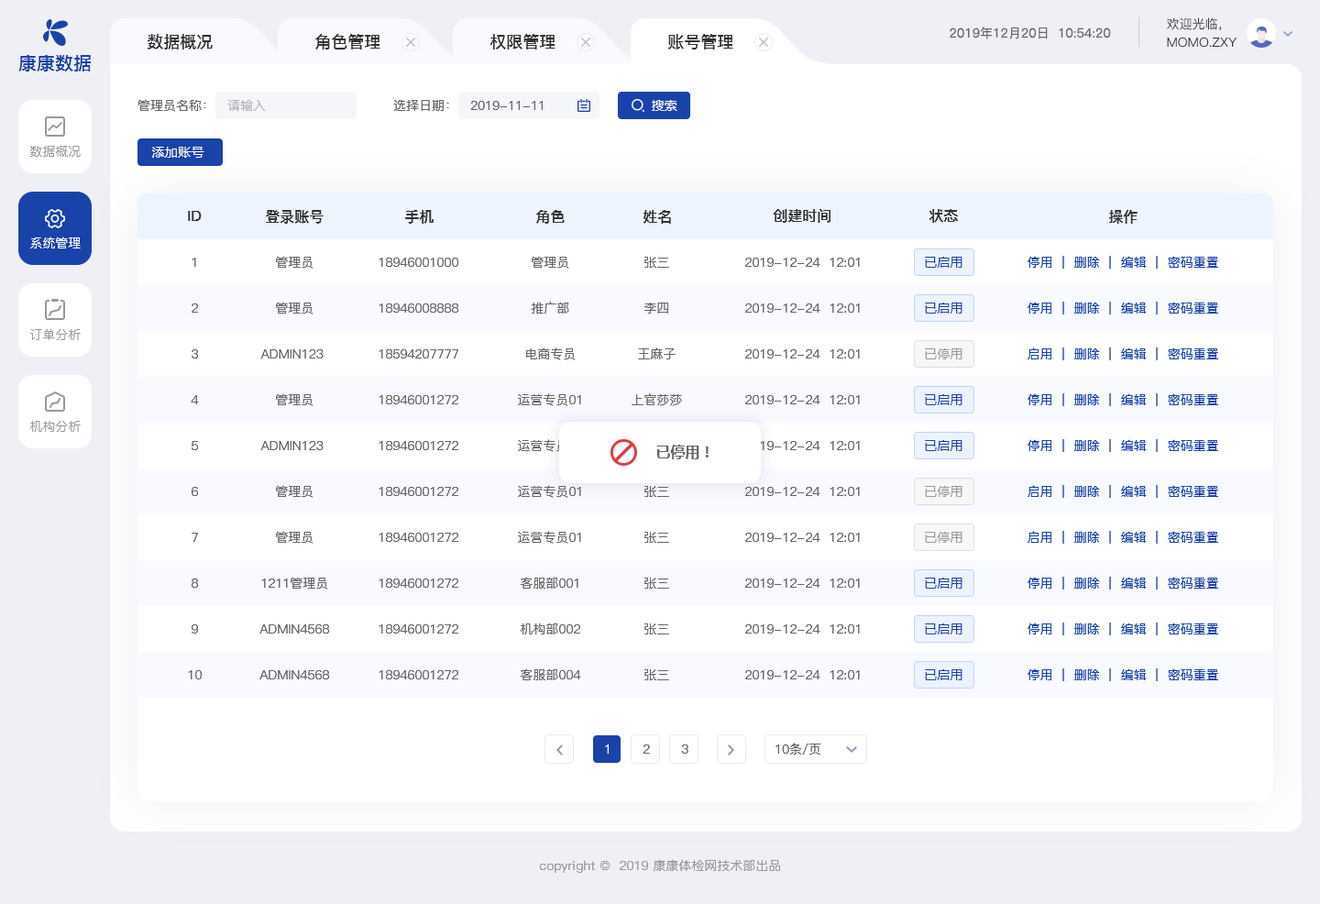
<style>
.page{position:relative;width:1320px;height:904px;background:#ffffff}
.page>*{position:absolute;margin:0}
.t1{font:12.8px "PingFang-SC-Medium";color:#333333;text-transform:uppercase}
.t2{font:12.8px "PingFang-SC-Regular";color:#666666}
.t3{font:16.5px "PingFang-SC-Bold";color:#333333;text-transform:uppercase}
.t4{font:18.3px "PingFangSC-Medium";color:#1a43a9;text-transform:uppercase}
.t5{font:12.8px "PingFang-SC-Medium";color:#666666}
.t6{font:12.8px "PingFang-SC-Medium";color:#b3b3b3}
.t7{font:12.8px "MicrosoftYaHei";letter-spacing:0.02em;color:#ffffff}
.t8{font:12.8px "PingFang-SC-Medium";color:#999999;text-transform:uppercase}
.t9{font:14.7px "PingFang-SC-Bold";color:#333333;text-transform:uppercase}
.t10{font:12.8px "PingFang-SC-Medium";color:#ffffff;text-transform:uppercase}
.t11{font:12.8px "PingFang-SC-Medium";color:#666666;text-transform:uppercase}
.t12{font:12.8px "MicrosoftYaHei";letter-spacing:0.02em;color:#1a43a9}
.t13{font:12.8px "PingFang-SC-Medium";color:#1a43a9;text-transform:uppercase}
.t14{font:12.8px "MicrosoftYaHei";letter-spacing:0.02em;color:#999999}
.t15{font:14.7px "MicrosoftYaHei-Bold";color:#666666}
.t16{font:12.8px "PingFang-SC-Medium";color:#999999}
</style>
<div class="page">
<p class="t1" style="left:1167px;top:17px;width:54px;height:14px">欢迎光临，</p>
<p class="t2" style="left:949px;top:27px;width:162px;height:12px">2019年12月20日  10:54:20</p>
<p class="t3" style="left:148px;top:34px;width:65px;height:15px">数据概况</p>
<p class="t3" style="left:315px;top:34px;width:65px;height:15px">角色管理</p>
<p class="t3" style="left:490px;top:34px;width:65px;height:15px">权限管理</p>
<p class="t3" style="left:668px;top:34px;width:65px;height:15px">账号管理</p>
<p class="t1" style="left:1167px;top:37px;width:69px;height:11px">momo.zxy</p>
<p class="t4" style="left:18px;top:54px;width:73px;height:17px">康康数据</p>
<p class="t5" style="left:137px;top:99px;width:69px;height:13px">管理员名称：</p>
<p class="t6" style="left:227px;top:100px;width:39px;height:11px">请输入</p>
<p class="t5" style="left:393px;top:100px;width:56px;height:11px">选择日期：</p>
<p class="t5" style="left:470px;top:101px;width:73px;height:9px">2019-11-11</p>
<p class="t7" style="left:652px;top:100px;width:25px;height:11px">搜索</p>
<p class="t8" style="left:30px;top:146px;width:51px;height:11px">数据概况</p>
<p class="t7" style="left:152px;top:147px;width:52px;height:11px">添加账号</p>
<p class="t9" style="left:266px;top:210px;width:57px;height:14px">登录账号</p>
<p class="t9" style="left:405px;top:210px;width:28px;height:14px">手机</p>
<p class="t9" style="left:536px;top:210px;width:29px;height:14px">角色</p>
<p class="t9" style="left:643px;top:210px;width:28px;height:14px">姓名</p>
<p class="t9" style="left:773px;top:209px;width:57px;height:14px">创建时间</p>
<p class="t9" style="left:929px;top:209px;width:29px;height:14px">状态</p>
<p class="t9" style="left:1109px;top:210px;width:28px;height:14px">操作</p>
<p class="t9" style="left:188px;top:211px;width:14px;height:10px">ID</p>
<p class="t10" style="left:30px;top:236px;width:51px;height:12px">系统管理</p>
<p class="t11" style="left:192px;top:258px;width:4px;height:9px">1</p>
<p class="t11" style="left:276px;top:256px;width:37px;height:13px">管理员</p>
<p class="t11" style="left:378px;top:258px;width:80px;height:9px">18946001000</p>
<p class="t11" style="left:532px;top:256px;width:37px;height:13px">管理员</p>
<p class="t11" style="left:644px;top:257px;width:25px;height:11px">张三</p>
<p class="t11" style="left:745px;top:258px;width:115px;height:9px">2019-12-24  12:01</p>
<p class="t12" style="left:925px;top:257px;width:37px;height:11px">已启用</p>
<p class="t13" style="left:1027px;top:256px;width:191px;height:13px">停用  |  删除  |  编辑  |  密码重置</p>
<p class="t11" style="left:192px;top:303px;width:6px;height:10px">2</p>
<p class="t11" style="left:276px;top:302px;width:37px;height:12px">管理员</p>
<p class="t11" style="left:378px;top:303px;width:81px;height:10px">18946008888</p>
<p class="t11" style="left:531px;top:302px;width:38px;height:12px">推广部</p>
<p class="t11" style="left:644px;top:302px;width:24px;height:11px">李四</p>
<p class="t11" style="left:745px;top:303px;width:115px;height:10px">2019-12-24  12:01</p>
<p class="t12" style="left:925px;top:302px;width:37px;height:11px">已启用</p>
<p class="t13" style="left:1027px;top:302px;width:191px;height:12px">停用  |  删除  |  编辑  |  密码重置</p>
<p class="t8" style="left:30px;top:328px;width:51px;height:12px">订单分析</p>
<p class="t11" style="left:192px;top:349px;width:6px;height:9px">3</p>
<p class="t11" style="left:260px;top:349px;width:63px;height:9px">admin123</p>
<p class="t11" style="left:378px;top:349px;width:80px;height:9px">18594207777</p>
<p class="t11" style="left:526px;top:347px;width:50px;height:13px">电商专员</p>
<p class="t11" style="left:638px;top:347px;width:37px;height:12px">王麻子</p>
<p class="t11" style="left:745px;top:349px;width:115px;height:9px">2019-12-24  12:01</p>
<p class="t14" style="left:925px;top:348px;width:37px;height:11px">已停用</p>
<p class="t13" style="left:1027px;top:347px;width:191px;height:13px">启用  |  删除  |  编辑  |  密码重置</p>
<p class="t11" style="left:191px;top:395px;width:8px;height:9px">4</p>
<p class="t11" style="left:276px;top:393px;width:37px;height:13px">管理员</p>
<p class="t11" style="left:378px;top:395px;width:80px;height:9px">18946001272</p>
<p class="t11" style="left:518px;top:393px;width:63px;height:13px">运营专员01</p>
<p class="t11" style="left:631px;top:393px;width:51px;height:13px">上官莎莎</p>
<p class="t11" style="left:745px;top:395px;width:115px;height:9px">2019-12-24  12:01</p>
<p class="t12" style="left:925px;top:394px;width:37px;height:11px">已启用</p>
<p class="t13" style="left:1027px;top:393px;width:191px;height:13px">停用  |  删除  |  编辑  |  密码重置</p>
<p class="t8" style="left:29px;top:421px;width:52px;height:11px">机构分析</p>
<p class="t11" style="left:192px;top:441px;width:6px;height:9px">5</p>
<p class="t11" style="left:260px;top:441px;width:63px;height:9px">admin123</p>
<p class="t11" style="left:378px;top:441px;width:80px;height:9px">18946001272</p>
<p class="t11" style="left:518px;top:439px;width:63px;height:13px">运营专员01</p>
<p class="t15" style="left:656px;top:444px;width:52px;height:15px">已停用！</p>
<p class="t11" style="left:745px;top:441px;width:115px;height:9px">2019-12-24  12:01</p>
<p class="t12" style="left:925px;top:440px;width:37px;height:11px">已启用</p>
<p class="t13" style="left:1027px;top:439px;width:191px;height:13px">停用  |  删除  |  编辑  |  密码重置</p>
<p class="t11" style="left:276px;top:485px;width:37px;height:13px">管理员</p>
<p class="t11" style="left:518px;top:485px;width:63px;height:13px">运营专员01</p>
<p class="t11" style="left:644px;top:486px;width:25px;height:11px">张三</p>
<p class="t14" style="left:925px;top:486px;width:37px;height:11px">已停用</p>
<p class="t13" style="left:1027px;top:485px;width:191px;height:13px">启用  |  删除  |  编辑  |  密码重置</p>
<p class="t11" style="left:192px;top:487px;width:6px;height:9px">6</p>
<p class="t11" style="left:378px;top:487px;width:80px;height:9px">18946001272</p>
<p class="t11" style="left:745px;top:487px;width:115px;height:9px">2019-12-24  12:01</p>
<p class="t11" style="left:192px;top:532px;width:6px;height:10px">7</p>
<p class="t11" style="left:276px;top:531px;width:37px;height:12px">管理员</p>
<p class="t11" style="left:378px;top:532px;width:80px;height:10px">18946001272</p>
<p class="t11" style="left:518px;top:531px;width:63px;height:12px">运营专员01</p>
<p class="t11" style="left:644px;top:532px;width:25px;height:11px">张三</p>
<p class="t11" style="left:745px;top:532px;width:115px;height:10px">2019-12-24  12:01</p>
<p class="t14" style="left:925px;top:532px;width:37px;height:11px">已停用</p>
<p class="t13" style="left:1027px;top:531px;width:191px;height:12px">启用  |  删除  |  编辑  |  密码重置</p>
<p class="t11" style="left:192px;top:578px;width:7px;height:9px">8</p>
<p class="t11" style="left:261px;top:576px;width:67px;height:13px">1211管理员</p>
<p class="t11" style="left:378px;top:578px;width:80px;height:9px">18946001272</p>
<p class="t11" style="left:520px;top:576px;width:58px;height:12px">客服部001</p>
<p class="t11" style="left:644px;top:577px;width:25px;height:11px">张三</p>
<p class="t11" style="left:745px;top:578px;width:115px;height:9px">2019-12-24  12:01</p>
<p class="t12" style="left:925px;top:577px;width:37px;height:11px">已启用</p>
<p class="t13" style="left:1027px;top:576px;width:191px;height:13px">停用  |  删除  |  编辑  |  密码重置</p>
<p class="t11" style="left:192px;top:624px;width:6px;height:9px">9</p>
<p class="t11" style="left:259px;top:624px;width:71px;height:9px">admin4568</p>
<p class="t11" style="left:378px;top:624px;width:80px;height:9px">18946001272</p>
<p class="t11" style="left:520px;top:622px;width:60px;height:12px">机构部002</p>
<p class="t11" style="left:644px;top:623px;width:25px;height:11px">张三</p>
<p class="t11" style="left:745px;top:624px;width:115px;height:9px">2019-12-24  12:01</p>
<p class="t12" style="left:925px;top:623px;width:37px;height:11px">已启用</p>
<p class="t13" style="left:1027px;top:622px;width:191px;height:13px">停用  |  删除  |  编辑  |  密码重置</p>
<p class="t11" style="left:188px;top:670px;width:14px;height:9px">10</p>
<p class="t11" style="left:259px;top:670px;width:71px;height:9px">admin4568</p>
<p class="t11" style="left:378px;top:670px;width:80px;height:9px">18946001272</p>
<p class="t11" style="left:520px;top:668px;width:61px;height:12px">客服部004</p>
<p class="t11" style="left:644px;top:669px;width:25px;height:11px">张三</p>
<p class="t11" style="left:745px;top:670px;width:115px;height:9px">2019-12-24  12:01</p>
<p class="t12" style="left:925px;top:669px;width:37px;height:11px">已启用</p>
<p class="t13" style="left:1027px;top:668px;width:191px;height:13px">停用  |  删除  |  编辑  |  密码重置</p>
<p class="t10" style="left:605px;top:744px;width:4px;height:9px">1</p>
<p class="t11" style="left:642px;top:744px;width:8px;height:9px">2</p>
<p class="t11" style="left:681px;top:744px;width:7px;height:9px">3</p>
<p class="t11" style="left:775px;top:742px;width:46px;height:12px">10条/页</p>
<p class="t16" style="left:540px;top:859px;width:240px;height:13px">copyright ©  2019 康康体检网技术部出品</p>
</div>
